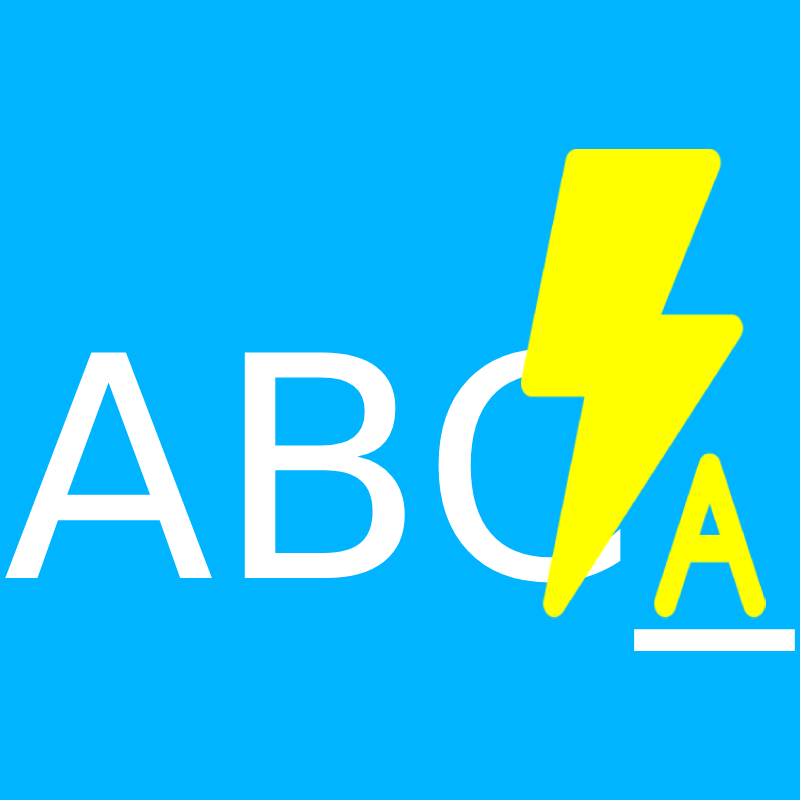
<style>
.page{position:relative;width:800px;height:800px;background:#00b4ff}
.page>*{position:absolute;margin:0}
.t1{font:309.3px "DejaVuSans";color:#ffffff}
</style>
<div class="page">
<p class="t1" style="left:5px;top:348px;width:790px;height:303px">ABC_</p>
</div>
